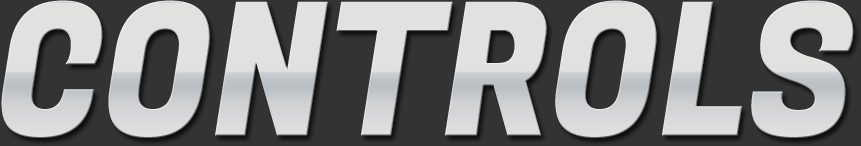
<style>
.page{position:relative;width:861px;height:146px;background:#333333}
.page>*{position:absolute;margin:0}
.t1{font:185.2px "FugazOne-Regular";color:#dfdfdf;scale:0.89 1}
</style>
<div class="page">
<p class="t1" style="left:1px;top:0px;width:853px;height:138px">CONTROLS</p>
</div>
